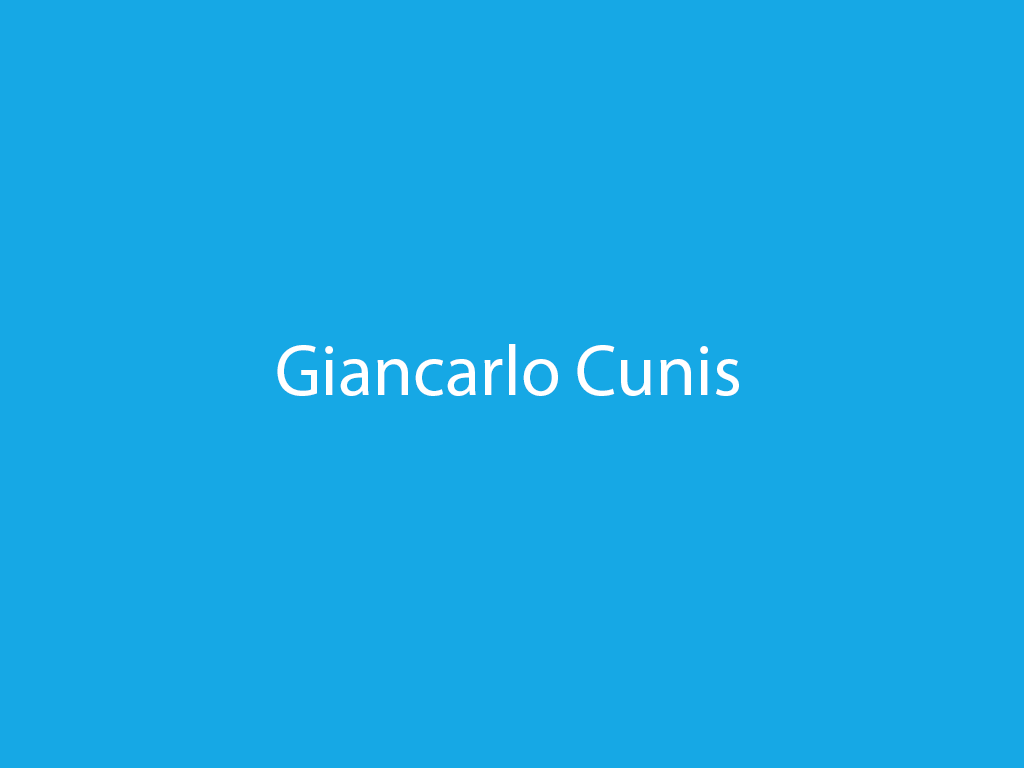
<style>
.page{position:relative;width:1024px;height:768px;background:#16a8e5}
.page>*{position:absolute;margin:0}
.t1{font:72px "MyriadPro-Regular";color:#ffffff}
</style>
<div class="page">
<p class="t1" style="left:277px;top:344px;width:462px;height:52px">Giancarlo Cunis</p>
</div>
